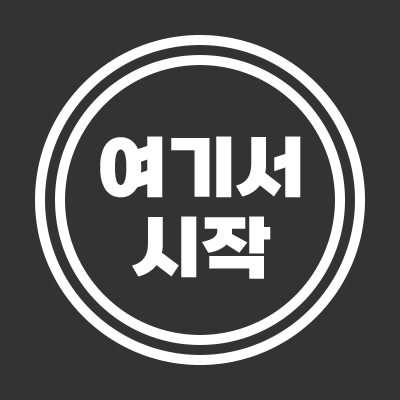
<style>
.page{position:relative;width:400px;height:400px;background:#333333}
.page>*{position:absolute;margin:0}
.t1{font:72px/80px "SBAggroB";color:#ffffff}
</style>
<div class="page">
<p class="t1" style="left:100px;top:136px;width:201px;height:143px;text-align:center">여기서<br>시작</p>
</div>
